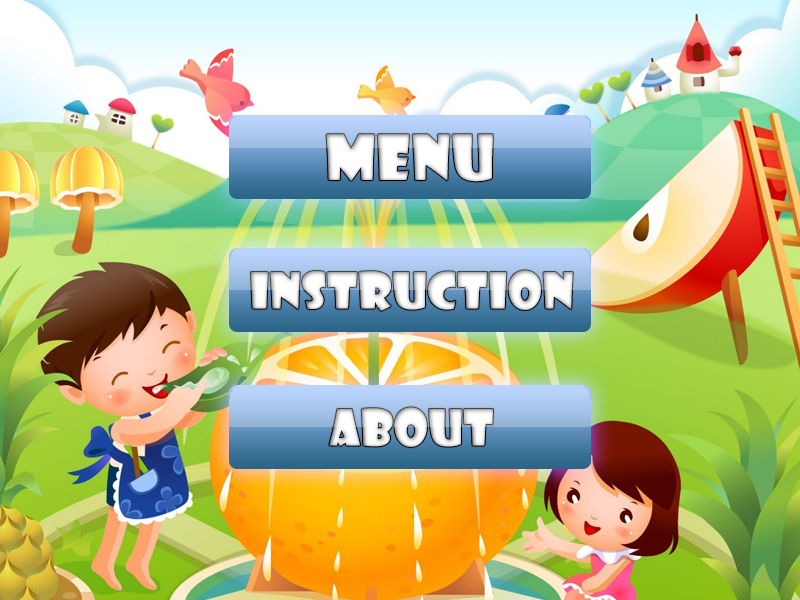
<style>
.page{position:relative;width:800px;height:600px}
.page>*{position:absolute;margin:0}
.t1{font:60px "ShowcardGothic-Reg";color:#fcfcfc;font-weight:bold}
.t2{font:48px "ShowcardGothic-Reg";color:#f6f6f6;font-weight:bold}
.t3{font:48px "ShowcardGothic-Reg";color:#f5f5f5;font-weight:bold}
</style>
<div class="page">
<p class="t1" style="left:326px;top:134px;width:167px;height:48px">MENU</p>
<p class="t2" style="left:251px;top:270px;width:322px;height:41px">Instruction</p>
<p class="t3" style="left:329px;top:407px;width:164px;height:40px">ABOUT</p>
</div>
